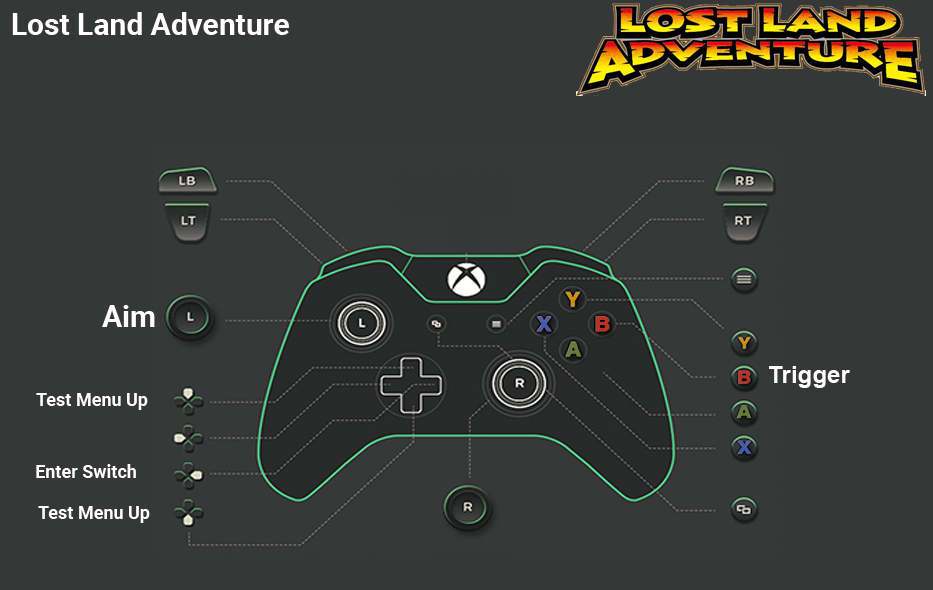
<style>
.page{position:relative;width:933px;height:590px;background:#363838}
.page>*{position:absolute;margin:0}
.t1{font:30px "Roboto-Bold";color:#ffffff}
.t2{font:30px "Roboto-Bold";color:#fefefe}
.t3{font:24px "Arial-BoldMT";color:#fefefe}
.t4{font:18px "Roboto-Bold";color:#ffffff}
</style>
<div class="page">
<p class="t1" style="left:12px;top:12px;width:277px;height:23px">Lost Land Adventure</p>
<p class="t2" style="left:102px;top:305px;width:53px;height:22px">Aim</p>
<p class="t3" style="left:769px;top:366px;width:81px;height:22px">Trigger</p>
<p class="t4" style="left:36px;top:393px;width:112px;height:17px">Test Menu Up</p>
<p class="t4" style="left:36px;top:464px;width:100px;height:14px">Enter Switch</p>
<p class="t4" style="left:38px;top:506px;width:112px;height:17px">Test Menu Up</p>
</div>
